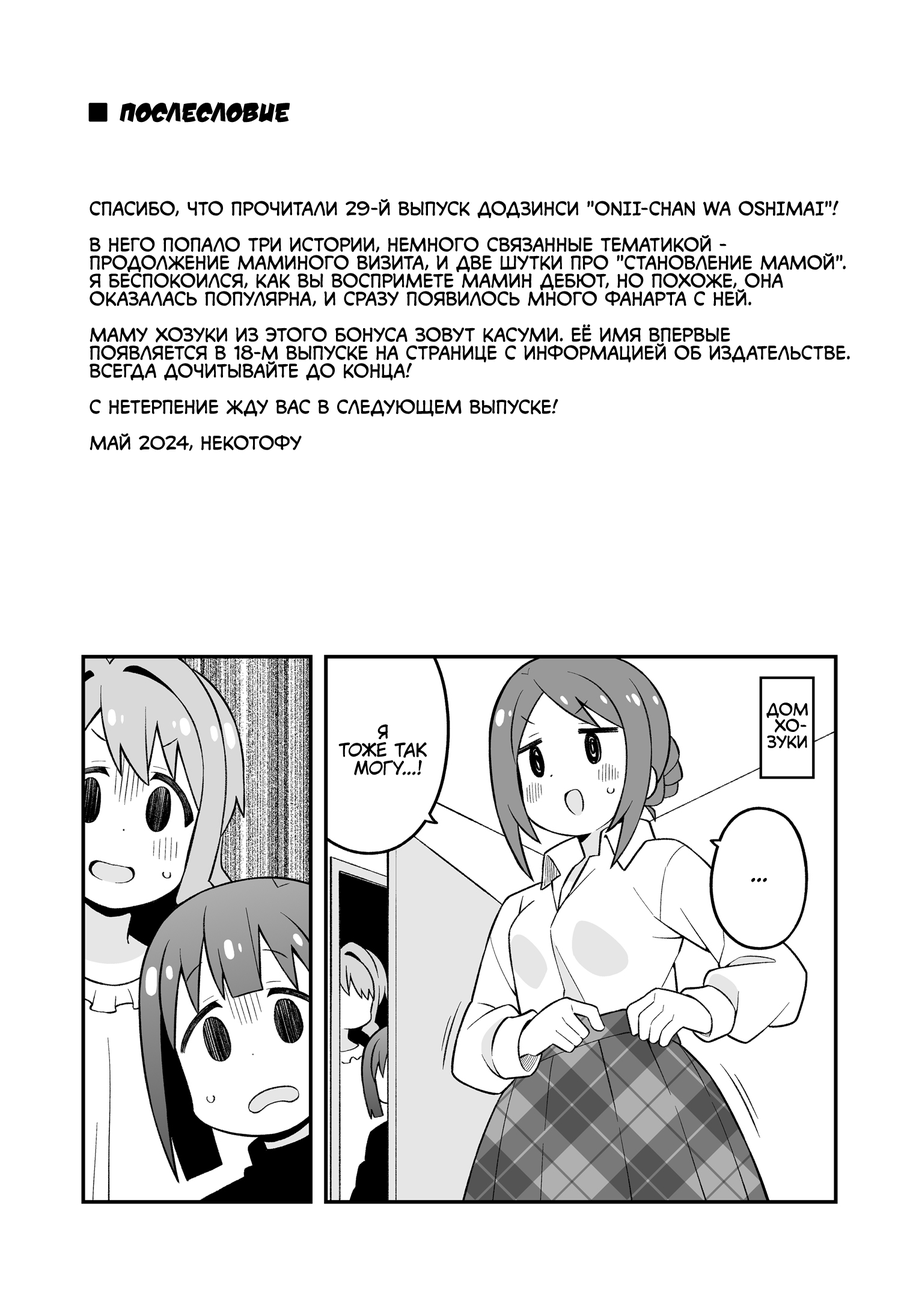
<style>
.page{position:relative;width:919px;height:1298px;background:#ffffff}
.page>*{position:absolute;margin:0}
.t1{font:27px "v_DamnNoisyKids";color:#000000;text-transform:uppercase}
.t2{font:18px "v_CCMonologous";color:#000000;text-transform:uppercase}
.t3{font:16.2px "v_CCMonologous";color:#000000;text-transform:uppercase}
.t4{font:18px "KuraiVoice2";color:#000000;text-transform:uppercase}
.t5{font:21.6px "KuraiVoice2";color:#000000;text-transform:uppercase}
</style>
<div class="page">
<p class="t1" style="left:120px;top:102px;width:170px;height:21px">Послесловие</p>
<p class="t2" style="left:90px;top:199px;width:760px;height:252px">Спасибо, что прочитали 29-й выпуск додзинси "Onii-chan wa Oshimai"!<br><br>В него попало три истории, немного связанные тематикой -<br>продолжение маминого визита, и две шутки про "становление мамой".<br>Я беспокоился, как вы воспримете мамин дебют, но похоже, она<br>оказалась популярна, и сразу появилось много фанарта с ней.<br><br>Маму Хозуки из этого бонуса зовут Касуми. Её имя впервые<br>появляется в 18-м выпуске на странице с информацией об издательстве.<br>Всегда дочитывайте до конца!<br><br>С нетерпение жду вас в следующем выпуске!<br><br>Май 2024, Некотофу</p>
<p class="t3" style="left:766px;top:702px;width:42px;height:47px;text-align:center">Дом<br>Хо-<br>зуки</p>
<p class="t4" style="left:338px;top:724px;width:89px;height:51px;text-align:center">Я<br>тоже так<br>могу...!</p>
<p class="t5" style="left:751px;top:878px;width:16px;height:4px">...</p>
</div>
